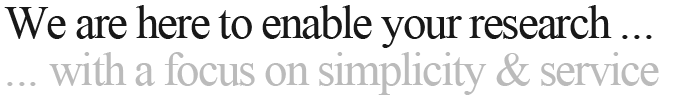
<style>
.page{position:relative;width:699px;height:99px;background:#ffffff}
.page>*{position:absolute;margin:0}
.t1{font:46.8px/46.8px "TimesNewRomanPSMT";letter-spacing:-0.04em;color:#bbbbbb}
.t2{font:46.8px/46.8px "TimesNewRomanPSMT";letter-spacing:-0.04em;color:#181818}
.t3{font:46.8px/46.8px "TimesNewRomanPSMT";color:#181818}
.t4{font:46.8px/46.8px "TimesNewRomanPSMT";color:#bbbbbb}
</style>
<div class="page">
<p class="t1" style="left:4px;top:5px;width:655px;height:90px"><span class="t2">We are here to enable your research </span><span class="t3">...<br></span><span class="t4">...</span> with a focus on simplicity &amp; service</p>
</div>
